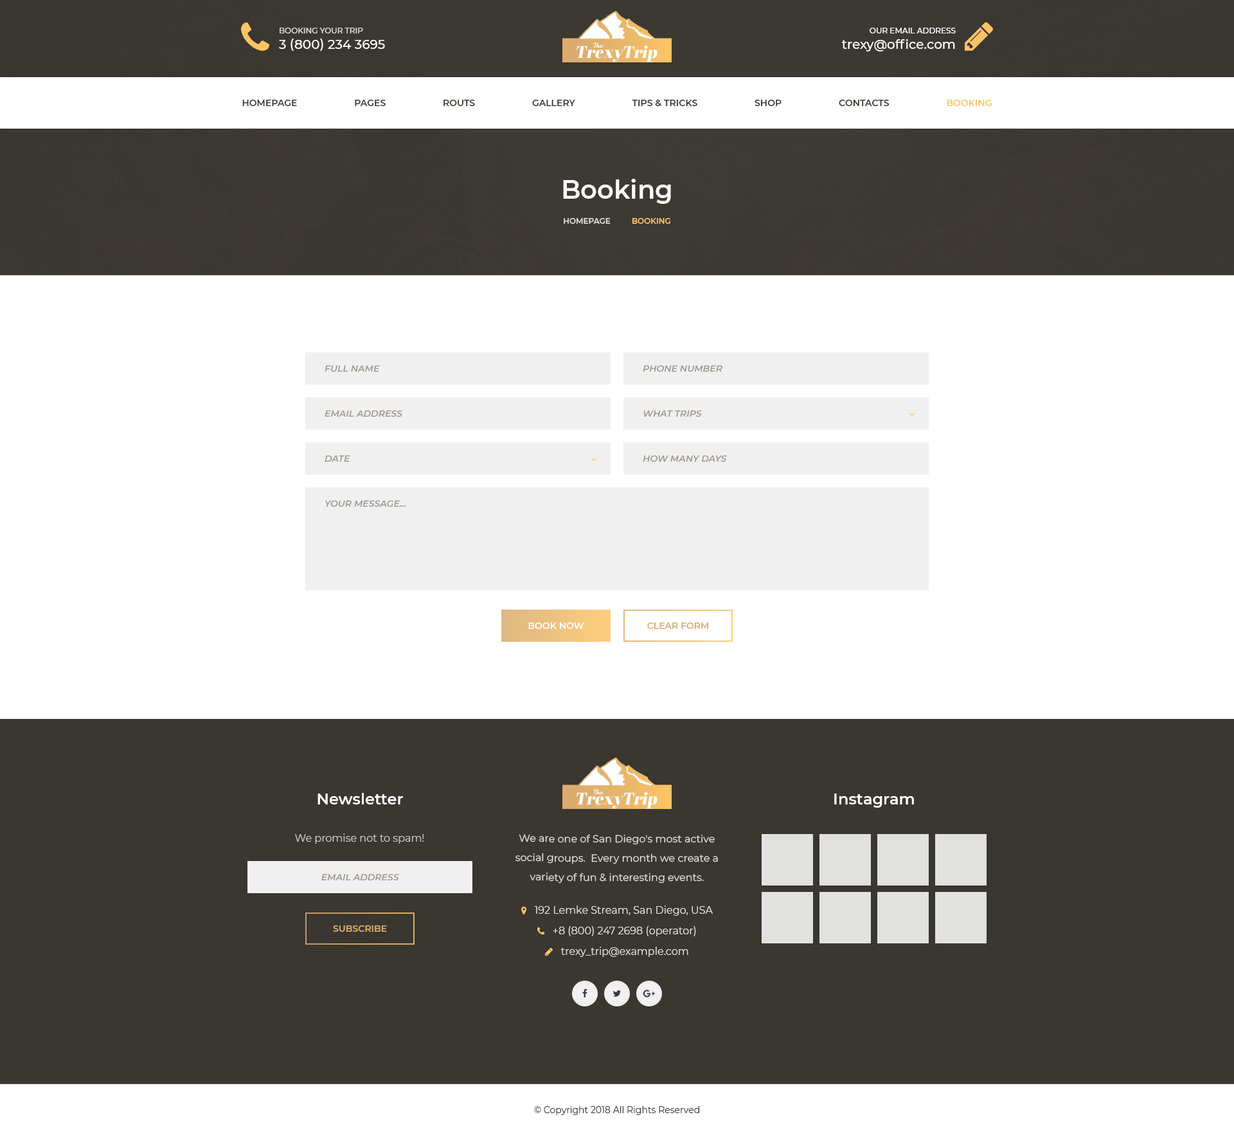
<style>
.page{position:relative;width:1234px;height:1135px;background:#ffffff}
.page>*{position:absolute;margin:0}
.t1{font:7.7px "Montserrat-Medium";color:#e1e1e0;text-transform:uppercase}
.t2{font:7.7px "Montserrat-Medium";color:#fefefe;text-transform:uppercase}
.t3{font:12.9px "Montserrat-Medium";color:#ffffff;text-transform:uppercase}
.t4{font:12.9px "Montserrat-Medium";color:#ffffff}
.t5{font:16.7px "AbrilFatface-Regular";color:#fefefe;font-style:italic}
.t6{font:9px "Montserrat-SemiBold";color:#3a3630;text-transform:uppercase}
.t7{font:9px "Montserrat-SemiBold";color:#fdc465;text-transform:uppercase}
.t8{font:25.7px "Montserrat-SemiBold";color:#ffffff}
.t9{font:7.7px "Montserrat-SemiBold";color:#dedfdf;text-transform:uppercase}
.t10{font:7.7px "Montserrat-SemiBold";color:#fcc465;text-transform:uppercase}
.t11{font:9px "Montserrat-SemiBoldItalic";color:#9e978f;text-transform:uppercase}
.t12{font:9px "Montserrat-SemiBold";color:#ffffff;text-transform:uppercase}
.t13{font:9px "Montserrat-SemiBold";color:#dbac6d;text-transform:uppercase}
.t14{font:15.4px "Montserrat-SemiBold";color:#ffffff}
.t15{font:10.3px "Montserrat-Regular";color:#c7c7c5}
.t16{font:10.3px/19.3px "Montserrat-Regular";color:#e1e1e0}
.t17{font:9px "Montserrat-Regular";color:#3a3630}
</style>
<div class="page">
<p class="t1" style="left:280px;top:28px;width:83px;height:5px">Booking your trip</p>
<p class="t2" style="left:870px;top:28px;width:86px;height:5px">Our Email address</p>
<p class="t3" style="left:279px;top:39px;width:106px;height:12px">3 (800) 234 3695</p>
<p class="t4" style="left:842px;top:39px;width:113px;height:12px">trexy@office.com</p>
<p class="t5" style="left:577px;top:46px;width:81px;height:16px">TrexyTrip</p>
<p class="t6" style="left:242px;top:100px;width:750px;height:6px">Homepage                       Pages                       Routs                       Gallery                       Tips &amp; Tricks                       Shop                       Contacts                       <span class="t7">Booking</span></p>
<p class="t8" style="left:563px;top:179px;width:108px;height:25px">Booking</p>
<p class="t9" style="left:564px;top:218px;width:106px;height:6px">homepage          <span class="t10">Booking</span></p>
<p class="t11" style="left:325px;top:365px;width:55px;height:7px">Full name</p>
<p class="t11" style="left:643px;top:365px;width:80px;height:7px">Phone Number</p>
<p class="t11" style="left:325px;top:410px;width:77px;height:7px">Email address</p>
<p class="t11" style="left:644px;top:410px;width:58px;height:7px">What Trips</p>
<p class="t11" style="left:325px;top:455px;width:25px;height:7px">Date</p>
<p class="t11" style="left:643px;top:455px;width:84px;height:7px">How many days</p>
<p class="t11" style="left:325px;top:500px;width:81px;height:7px">your Message...</p>
<p class="t12" style="left:528px;top:622px;width:56px;height:7px">Book now</p>
<p class="t13" style="left:647px;top:622px;width:62px;height:7px">Clear Form</p>
<p class="t14" style="left:318px;top:793px;width:85px;height:11px">Newsletter</p>
<p class="t5" style="left:577px;top:792px;width:81px;height:17px">TrexyTrip</p>
<p class="t14" style="left:834px;top:793px;width:80px;height:14px">Instagram</p>
<p class="t15" style="left:295px;top:833px;width:129px;height:10px">We promise not to spam!</p>
<p class="t16" style="left:516px;top:834px;width:202px;height:49px;text-align:center">We are one of San Diego's most active social groups.  Every month we create a  variety of fun &amp; interesting events.<br> and activities.</p>
<p class="t11" style="left:321px;top:874px;width:78px;height:7px">Email address</p>
<p class="t13" style="left:333px;top:925px;width:54px;height:7px">Subscribe</p>
<p class="t17" style="left:534px;top:1106px;width:165px;height:9px">© Copyright 2018 All Rights Reserved</p>
</div>
